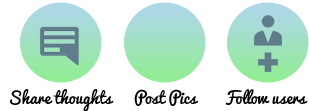
<style>
.page{position:relative;width:309px;height:111px;background:#ffffff}
.page>*{position:absolute;margin:0}
.t1{font:16px "Pacifico";color:#000000}
</style>
<div class="page">
<p class="t1" style="left:10px;top:89px;width:104px;height:23px">Share thoughts</p>
<p class="t1" style="left:134px;top:89px;width:64px;height:17px">Post Pics</p>
<p class="t1" style="left:225px;top:89px;width:83px;height:16px">Follow users</p>
</div>
